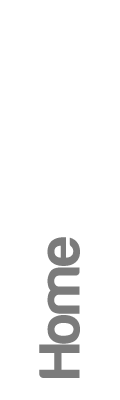
<style>
.page{position:relative;width:120px;height:400px;background:#ffffff}
.page>*{position:absolute;margin:0}
.t1{font:60px "Harabara-Bold";color:#7b7b7b}
</style>
<div class="page">
<p class="t1" style="left:39px;top:237px;width:41px;height:141px;rotate:-90deg">Home</p>
</div>
